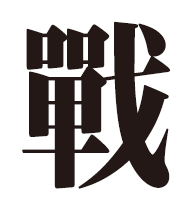
<style>
.page{position:relative;width:193px;height:211px;background:#ffffff}
.page>*{position:absolute;margin:0}
.t1{font:178.5px "KochoStd-Heavy";letter-spacing:0.015em;color:#231815;font-weight:bold;scale:0.88 1}
</style>
<div class="page">
<p class="t1" style="left:22px;top:21px;width:148px;height:168px">戰</p>
</div>
